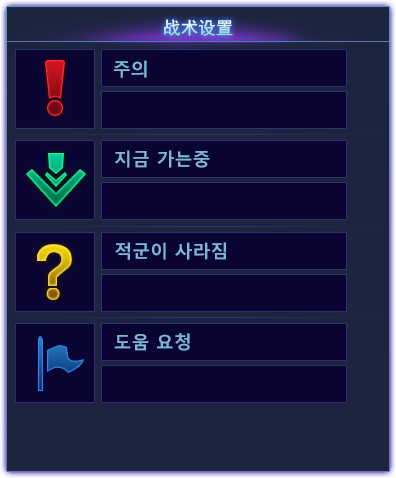
<style>
.page{position:relative;width:396px;height:478px;background:#090431}
.page>*{position:absolute;margin:0}
.t1{font:18px "MalgunGothicBold";color:#7cb7d9}
</style>
<div class="page">
<p class="t1" style="left:114px;top:60px;width:33px;height:18px">주의</p>
<p class="t1" style="left:115px;top:150px;width:95px;height:18px">지금 가는중</p>
<p class="t1" style="left:115px;top:242px;width:111px;height:18px">적군이 사라짐</p>
<p class="t1" style="left:114px;top:333px;width:76px;height:18px">도움 요청</p>
</div>
